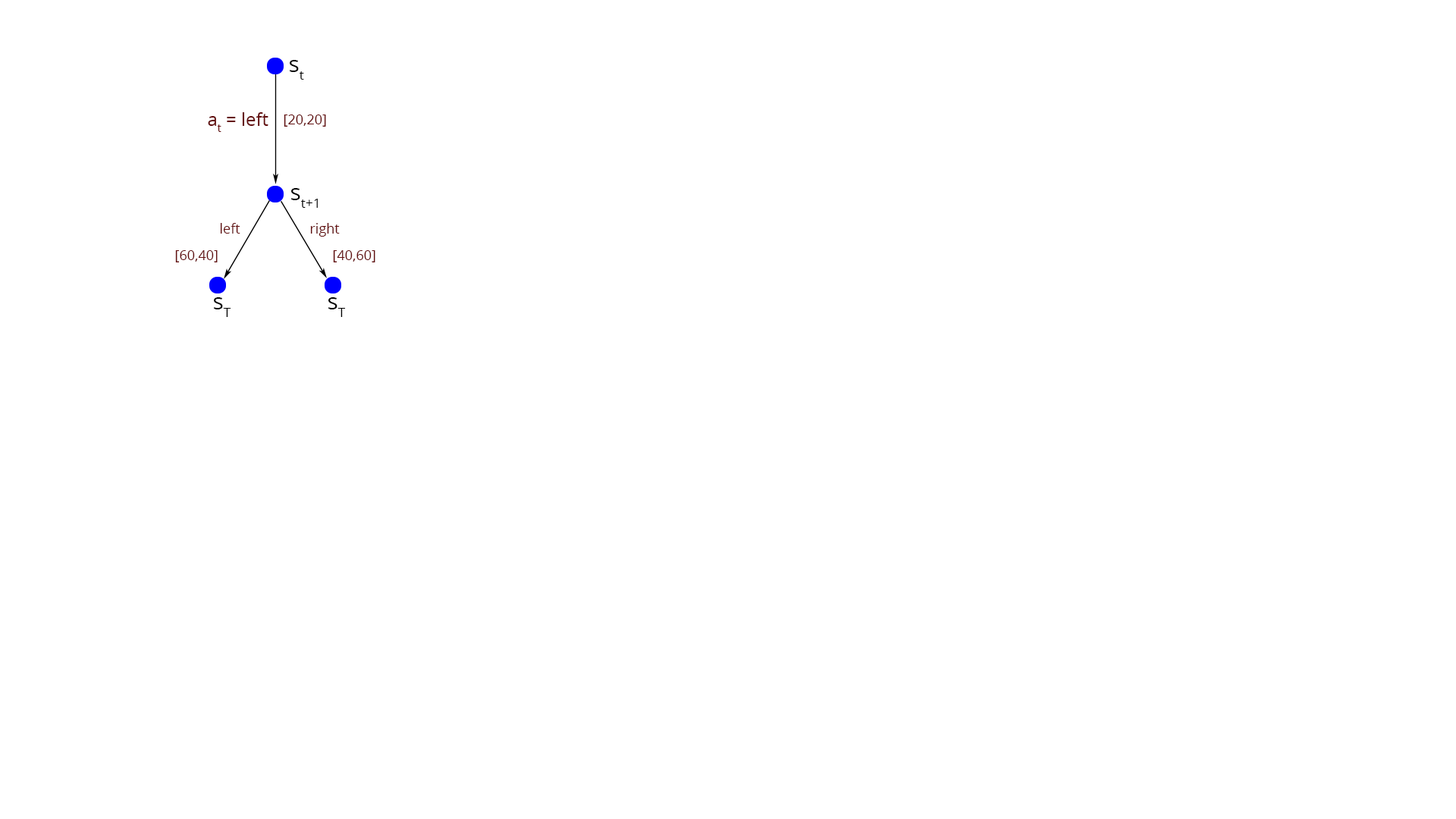
<style>
.page{position:relative;width:1456px;height:819px;background:#ffffff}
.page>*{position:absolute;margin:0}
.t1{font:22.7px "OpenSans";color:#000000}
.t2{font:18.2px "OpenSans";color:#641010}
.t3{font:13.6px "OpenSans";color:#641010}
</style>
<div class="page">
<p class="t1" style="left:290px;top:60px;width:14px;height:20px">st</p>
<p class="t2" style="left:208px;top:112px;width:60px;height:20px">at = left</p>
<p class="t3" style="left:284px;top:115px;width:42px;height:12px">[20,20]</p>
<p class="t1" style="left:291px;top:188px;width:27px;height:20px">st+1</p>
<p class="t3" style="left:220px;top:223px;width:20px;height:11px">left</p>
<p class="t3" style="left:310px;top:223px;width:30px;height:14px">right</p>
<p class="t3" style="left:175px;top:250px;width:43px;height:12px">[60,40]</p>
<p class="t3" style="left:333px;top:250px;width:42px;height:12px">[40,60]</p>
<p class="t1" style="left:214px;top:297px;width:17px;height:20px">sT</p>
<p class="t1" style="left:328px;top:297px;width:18px;height:20px">sT</p>
</div>
